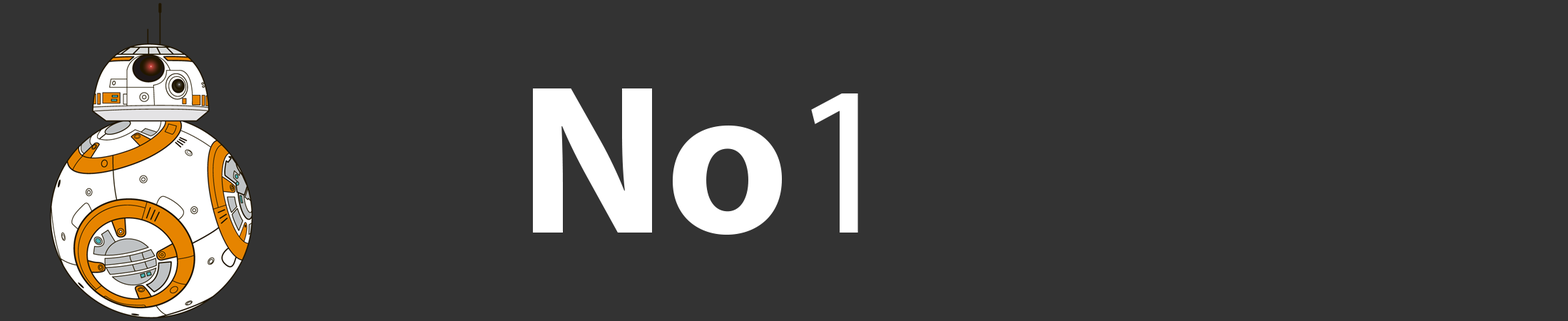
<style>
.page{position:relative;width:1568px;height:321px;background:#333333}
.page>*{position:absolute;margin:0}
.t1{font:214px "MyriadPro-Bold";color:#ffffff}
.t2{font:214px "MyriadPro-Regular";color:#ffffff}
</style>
<div class="page">
<p class="t1" style="left:533px;top:88px;width:325px;height:147px">No<span class="t2">1</span></p>
</div>
